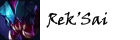
<style>
.page{position:relative;width:140px;height:40px;background:#ffffff}
.page>*{position:absolute;margin:0}
.t1{font:12px "VinerHandITC";color:#000000}
</style>
<div class="page">
<p class="t1" style="left:46px;top:11px;width:62px;height:17px">Rek’Sai</p>
</div>
